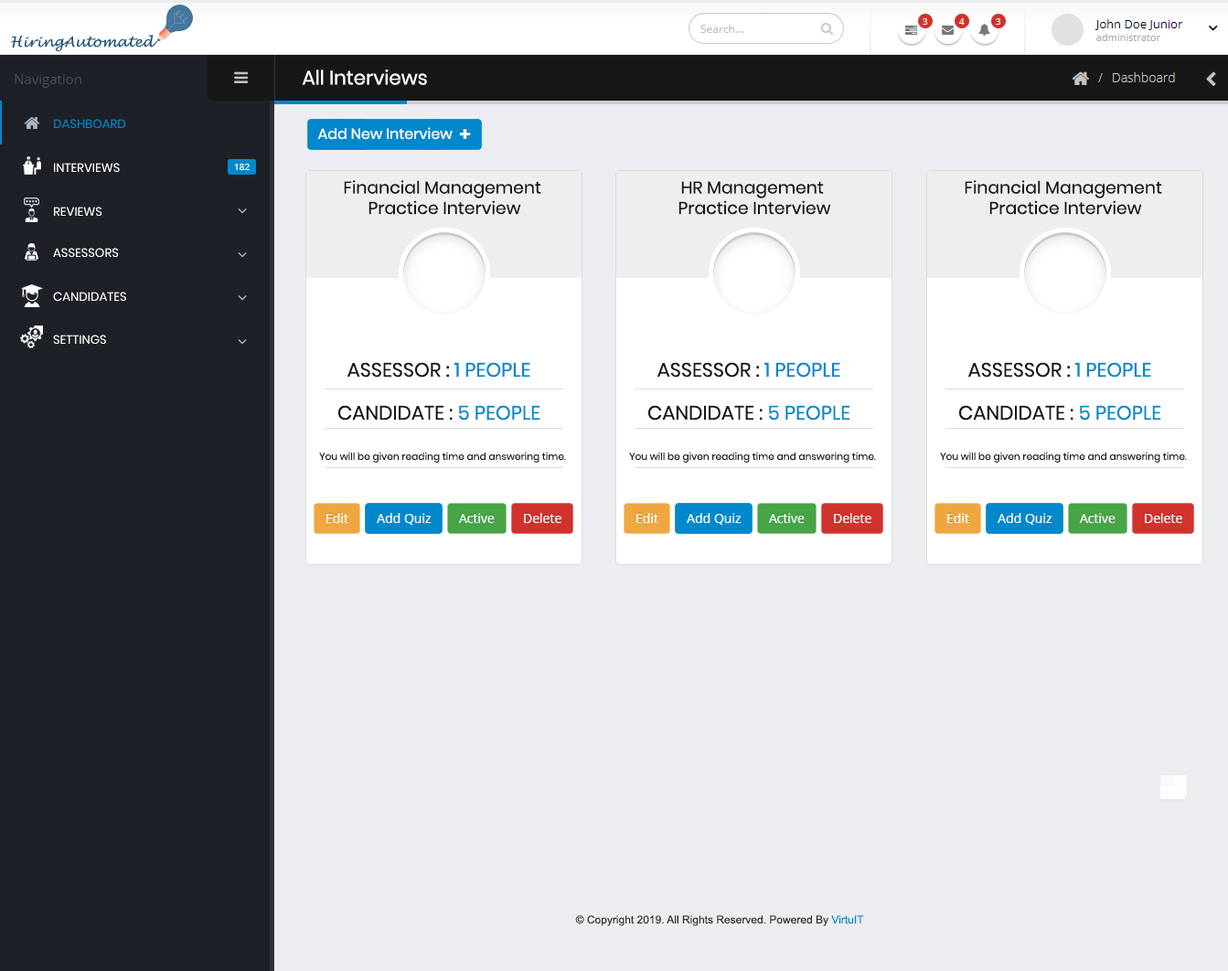
<style>
.page{position:relative;width:1228px;height:971px;background:#ecedf0}
.page>*{position:absolute;margin:0}
.t1{font:13.8px "LucidaHandwriting-Italic";color:#1f577f}
.t2{font:19.5px "Poppins-Regular";color:#ffffff}
.t3{font:12.2px "Poppins-Regular";color:#0088cc}
.t4{font:11px "Poppins-Regular";color:#fdfdfd}
.t5{font:12.2px "Poppins-Regular";color:#fdfdfd}
.t6{font:17.1px "Poppins-Regular";color:#171717}
.t7{font:19.5px "Poppins-Regular";color:#171717}
.t8{font:19.5px "Poppins-Regular";color:#0088cc}
.t9{font:9.8px "Poppins-Regular";color:#171717}
.t10{font:11px "ArialMT";color:#333333}
.t11{font:11px "ArialMT";color:#0088cc}
</style>
<div class="page">
<p class="t1" style="left:11px;top:35px;width:146px;height:17px">HiringAutomated</p>
<p class="t2" style="left:302px;top:69px;width:125px;height:16px">All Interviews</p>
<p class="t3" style="left:54px;top:119px;width:71px;height:9px">DASHBOARD</p>
<p class="t4" style="left:317px;top:127px;width:136px;height:13px">Add New Interview</p>
<p class="t5" style="left:54px;top:163px;width:66px;height:9px">INTERVIEWS</p>
<p class="t6" style="left:344px;top:180px;width:197px;height:35px;text-align:center">Financial Management <br>Practice Interview</p>
<p class="t6" style="left:678px;top:181px;width:153px;height:34px;text-align:center">HR Management <br>Practice Interview</p>
<p class="t6" style="left:965px;top:180px;width:197px;height:35px;text-align:center">Financial Management <br>Practice Interview</p>
<p class="t5" style="left:54px;top:207px;width:47px;height:9px">REVIEWS</p>
<p class="t5" style="left:53px;top:248px;width:65px;height:9px">ASSESSORS</p>
<p class="t5" style="left:53px;top:292px;width:73px;height:9px">CANDIDATES</p>
<p class="t5" style="left:53px;top:335px;width:53px;height:9px">SETTINGS</p>
<p class="t7" style="left:347px;top:362px;width:183px;height:16px">ASSESSOR : <span class="t8">1 PEOPLE</span></p>
<p class="t7" style="left:657px;top:362px;width:183px;height:16px">ASSESSOR : <span class="t8">1 PEOPLE</span></p>
<p class="t7" style="left:967px;top:362px;width:184px;height:16px">ASSESSOR : <span class="t8">1 PEOPLE</span></p>
<p class="t7" style="left:338px;top:405px;width:202px;height:16px">CANDIDATE : <span class="t8">5 PEOPLE</span></p>
<p class="t7" style="left:648px;top:405px;width:202px;height:16px">CANDIDATE : <span class="t8">5 PEOPLE</span></p>
<p class="t7" style="left:959px;top:405px;width:202px;height:16px">CANDIDATE : <span class="t8">5 PEOPLE</span></p>
<p class="t9" style="left:319px;top:452px;width:247px;height:11px">You will be given reading time and answering time.</p>
<p class="t9" style="left:629px;top:452px;width:247px;height:11px">You will be given reading time and answering time.</p>
<p class="t9" style="left:940px;top:452px;width:247px;height:11px">You will be given reading time and answering time.</p>
<p class="t10" style="left:575px;top:915px;width:289px;height:11px">© Copyright 2019. All Rights Reserved. Powered By <span class="t11">VirtuIT</span></p>
</div>
